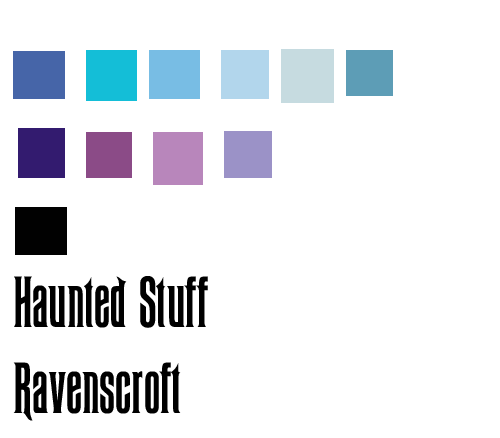
<style>
.page{position:relative;width:500px;height:438px;background:#ffffff}
.page>*{position:absolute;margin:0}
.t1{font:72px "Ravenscroft";color:#000000}
</style>
<div class="page">
<p class="t1" style="left:13px;top:276px;width:195px;height:145px">Haunted Stuff<br>Ravenscroft</p>
</div>
